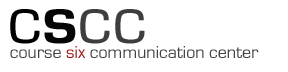
<style>
.page{position:relative;width:288px;height:72px;background:#ffffff}
.page>*{position:absolute;margin:0}
.t1{font:72px "EurostileRegular";color:#3f3e3e}
.t2{font:72px "EurostileRegular";color:#000000}
.t3{font:72px "EurostileBold";color:#060606}
.t4{font:18px "EurostileRegular";color:#444444}
.t5{font:18px "EurostileRegular";color:#961515}
</style>
<div class="page">
<p class="t1" style="left:10px;top:9px;width:135px;height:35px"><span class="t2">c</span><span class="t3">s</span>cc</p>
<p class="t4" style="left:10px;top:46px;width:249px;height:12px">course <span class="t5">six</span> communication center</p>
</div>
